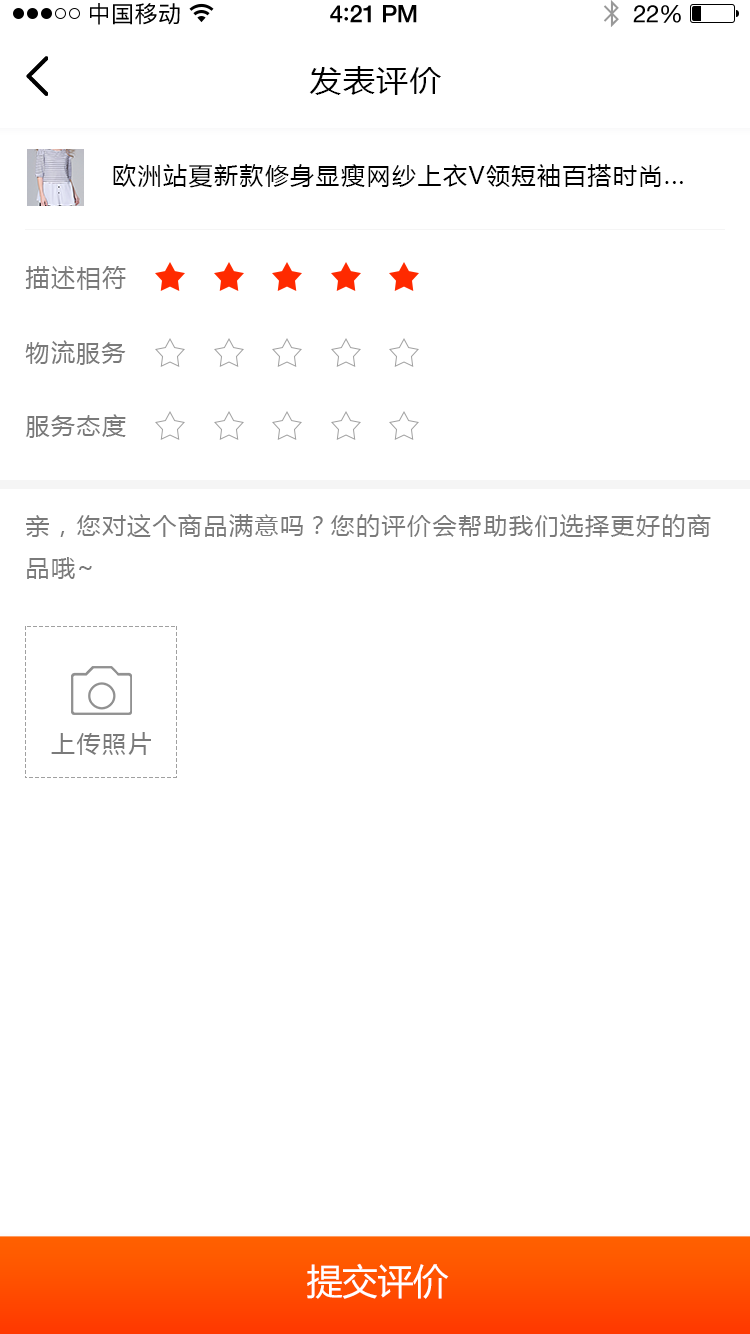
<style>
.page{position:relative;width:750px;height:1334px;background:#ffffff}
.page>*{position:absolute;margin:0}
.t1{font:23px "PingFangSC-Regular";letter-spacing:0.02em;color:#000000}
.t2{font:24px "HelveticaNeue-Medium";letter-spacing:-0.02em;color:#000000}
.t3{font:26px "Avenir-Medium";letter-spacing:-0.02em;color:#000000}
.t4{font:24px "HelveticaNeue";letter-spacing:-0.02em;color:#000000}
.t5{font:30px "MicrosoftYaHei";letter-spacing:0.05em;color:#000000;scale:1.06 1}
.t6{font:24px "MicrosoftYaHei";letter-spacing:0.06em;color:#000000;text-transform:uppercase}
.t7{font:24px "MicrosoftYaHei";letter-spacing:0.06em;color:#7a7a7a;text-transform:uppercase}
.t8{font:36px "MicrosoftYaHei";letter-spacing:-0.02em;color:#ffffff}
</style>
<div class="page">
<p class="t1" style="left:90px;top:3px;width:90px;height:22px">中国移动</p>
<p class="t2" style="left:330px;top:5px;width:87px;height:18px">4<span class="t3">:</span>21 PM</p>
<p class="t4" style="left:633px;top:5px;width:48px;height:18px">22%</p>
<p class="t5" style="left:309px;top:66px;width:132px;height:29px">发表评价</p>
<p class="t6" style="left:113px;top:164px;width:570px;height:24px">欧洲站夏新款修身显瘦网纱上衣v领短袖百搭时尚...</p>
<p class="t7" style="left:25px;top:266px;width:101px;height:24px">描述相符</p>
<p class="t7" style="left:25px;top:340px;width:101px;height:25px">物流服务</p>
<p class="t7" style="left:25px;top:414px;width:101px;height:24px">服务态度</p>
<p class="t7" style="left:26px;top:514px;width:685px;height:65px">亲，您对这个商品满意吗？您的评价会帮助我们选择更好的商<br>品哦~</p>
<p class="t7" style="left:51px;top:732px;width:100px;height:23px">上传照片</p>
<p class="t8" style="left:307px;top:1263px;width:142px;height:36px">提交评价</p>
</div>
